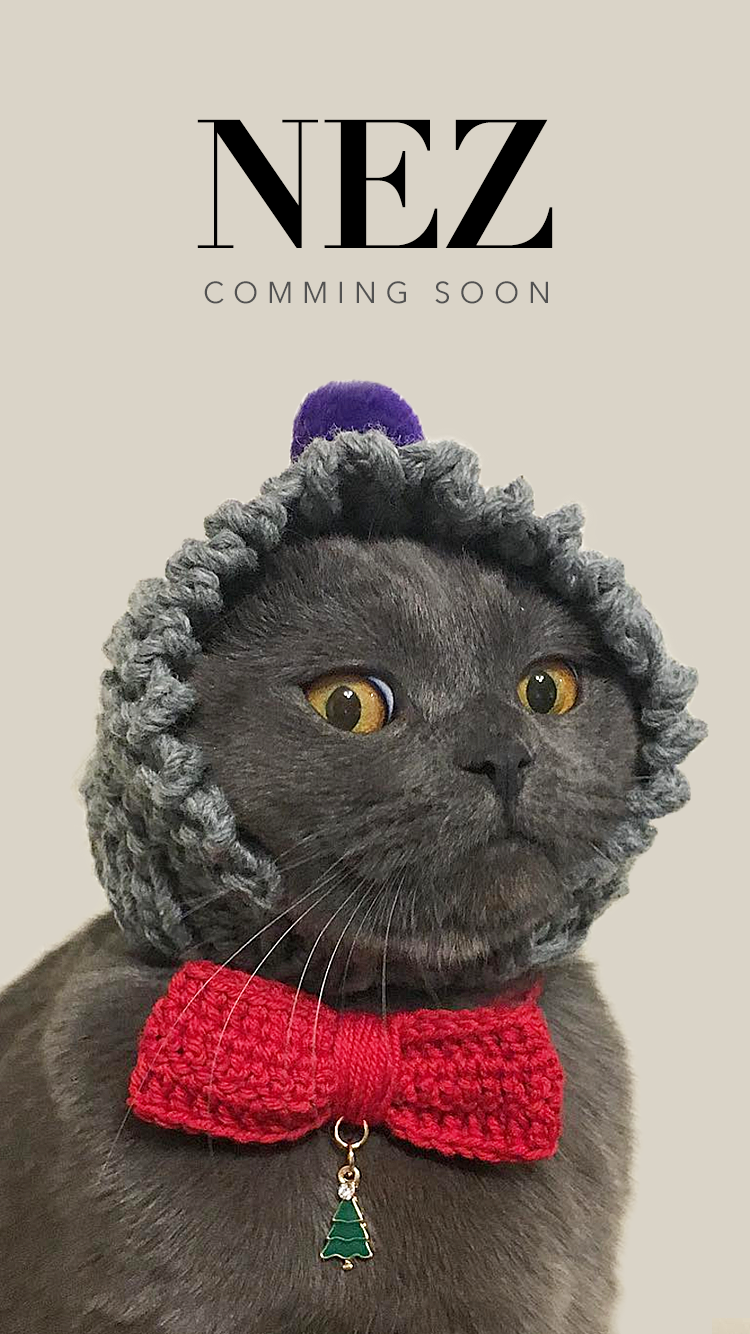
<style>
.page{position:relative;width:750px;height:1334px;background:#dad4c8}
.page>*{position:absolute;margin:0}
.t1{font:180px "Didot-Bold";letter-spacing:-0.03em;color:#000000;text-transform:uppercase}
.t2{font:30px "AvenirNext-Regular";letter-spacing:0.31em;color:#525252;text-transform:uppercase}
</style>
<div class="page">
<p class="t1" style="left:197px;top:119px;width:356px;height:129px">nez</p>
<p class="t2" style="left:204px;top:281px;width:344px;height:23px">comming soon</p>
</div>
